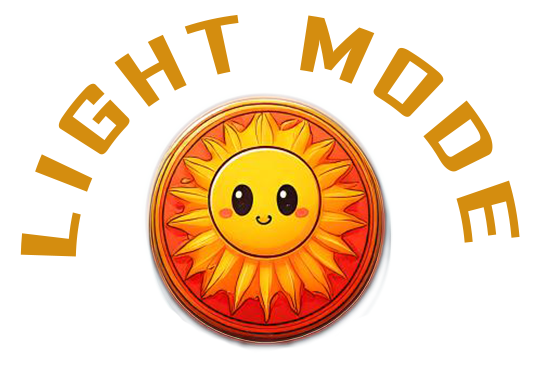
<style>
.page{position:relative;width:544px;height:367px;background:#ffffff}
.page>*{position:absolute;margin:0}
.t1{font:72px "AgencyFB-Bold";letter-spacing:0.1em;color:#d48d0f}
</style>
<div class="page">
<p class="t1" style="left:20px;top:14px;width:500px;height:243px;text-align:center">LIGHT MODE</p>
</div>
